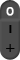
<style>
.page{position:relative;width:20px;height:60px;background:#4c4c4c}
.page>*{position:absolute;margin:0}
.t1{font:12.4px "GujaratiSangamMN";color:#ffffff;font-weight:bold;scale:1.12 1}
.t2{font:12px "GujaratiSangamMN";color:#000000;scale:1.88 1}
.t3{font:15.5px "GujaratiSangamMN";color:#000000}
</style>
<div class="page">
<p class="t1" style="left:6px;top:7px;width:8px;height:9px">0</p>
<p class="t2" style="left:9px;top:25px;width:3px;height:8px">I</p>
<p class="t3" style="left:6px;top:44px;width:9px;height:8px">+</p>
</div>
